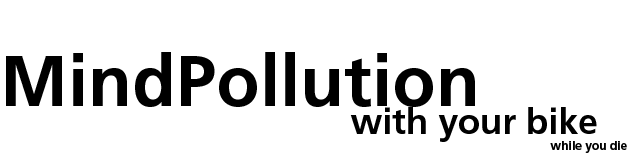
<style>
.page{position:relative;width:640px;height:160px;background:#ffffff}
.page>*{position:absolute;margin:0}
.t1{font:72px "FrutigerLTPro-Bold";color:#000000}
.t2{font:36px "FrutigerLTPro-Bold";color:#000000}
.t3{font:12px "FrutigerLTPro-Bold";color:#000000}
</style>
<div class="page">
<p class="t1" style="left:6px;top:52px;width:469px;height:55px">MindPollution</p>
<p class="t2" style="left:350px;top:107px;width:247px;height:35px">with your bike</p>
<p class="t3" style="left:550px;top:141px;width:77px;height:12px">while you die</p>
</div>
